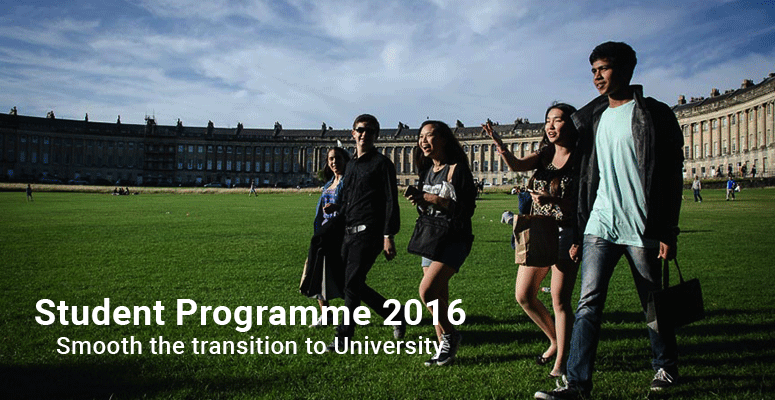
<style>
.page{position:relative;width:775px;height:400px}
.page>*{position:absolute;margin:0}
.t1{font:24px "Roboto-Medium";letter-spacing:0.02em;color:#ffffff}
.t2{font:36px "Roboto-Bold";letter-spacing:0.02em;color:#ffffff}
</style>
<div class="page">
<p class="t1" style="left:35px;top:298px;width:431px;height:61px;text-align:center"><span class="t2">Student Programme 2016<br></span>Smooth the transition to University</p>
</div>
